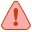
<style>
.page{position:relative;width:32px;height:32px;background:#ffffff}
.page>*{position:absolute;margin:0}
.t1{font:26px "GillSans-Bold";color:#c63e14}
</style>
<div class="page">
<p class="t1" style="left:13px;top:8px;width:5px;height:18px">!</p>
</div>
